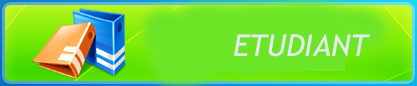
<style>
.page{position:relative;width:417px;height:86px;background:#6de527}
.page>*{position:absolute;margin:0}
.t1{font:30px "TrebuchetMS-Italic";color:#e4e9e9}
</style>
<div class="page">
<p class="t1" style="left:234px;top:34px;width:136px;height:23px">ETUDIANT</p>
</div>
